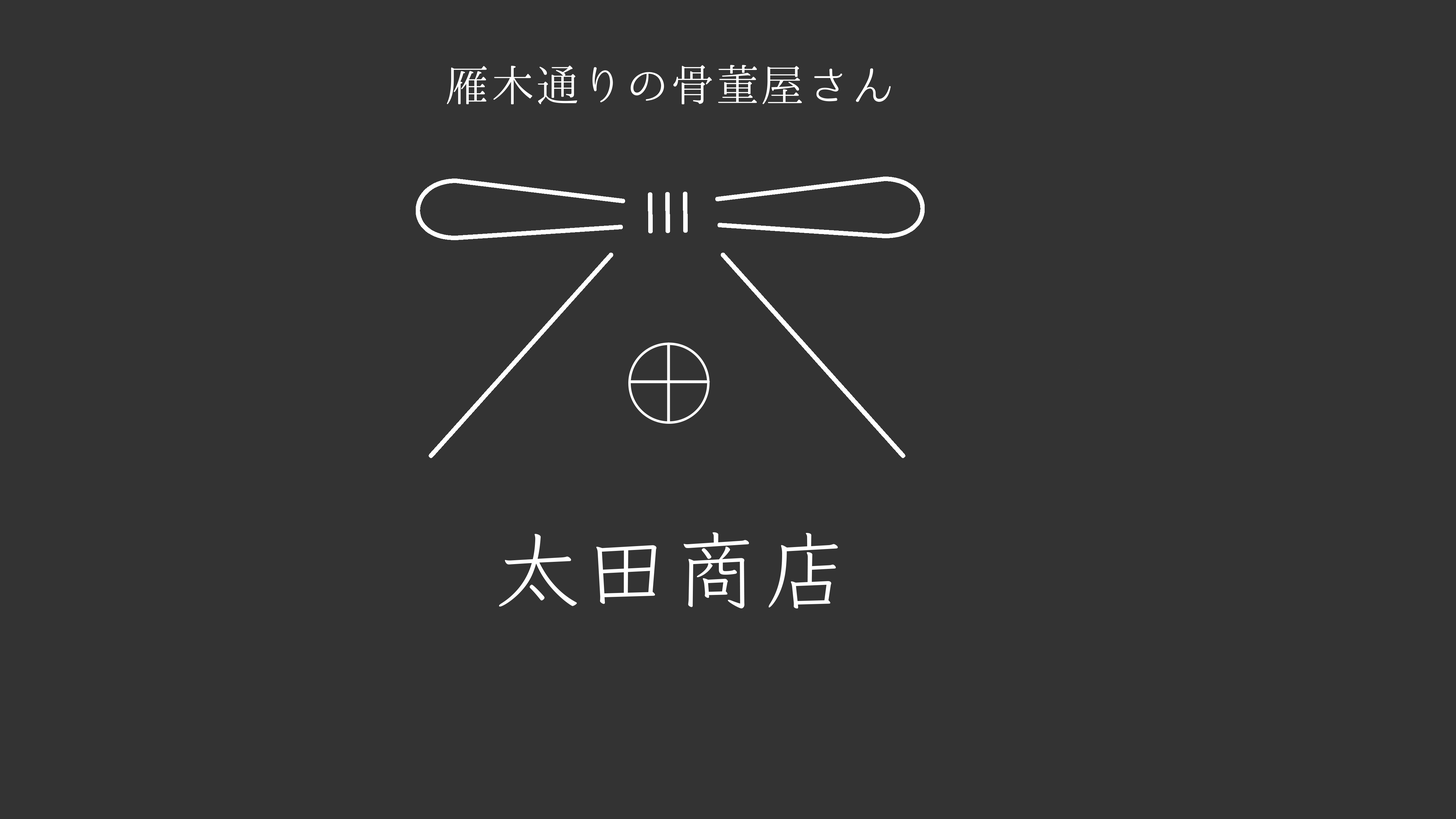
<style>
.page{position:relative;width:1456px;height:819px;background:#333333}
.page>*{position:absolute;margin:0}
.t1{font:43.9px "02UtsukushiMincho";letter-spacing:0.025em;color:#ffffff}
.t2{font:84.9px "Klee-Medium";letter-spacing:0.06em;color:#ffffff}
</style>
<div class="page">
<p class="t1" style="left:447px;top:65px;width:444px;height:39px">雁木通りの骨董屋さん</p>
<p class="t2" style="left:499px;top:532px;width:339px;height:77px">太田商店</p>
</div>
